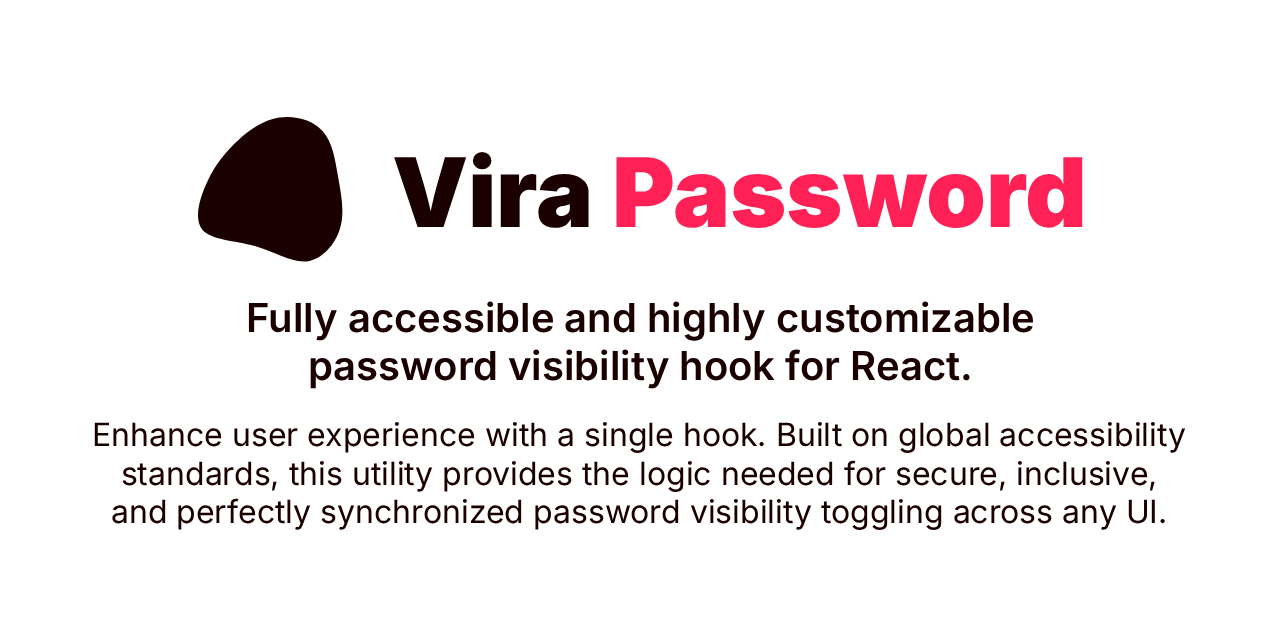
<style>
.page{position:relative;width:1280px;height:640px;background:#ffffff}
.page>*{position:absolute;margin:0}
.t1{font:96px "Inter-Black";color:#ff2056}
.t2{font:96px "Inter-Black";color:#1b0000}
.t3{font:40px "Inter-SemiBold";color:#1b0000}
.t4{font:32px "Inter-Regular";color:#1b0000}
</style>
<div class="page">
<p class="t1" style="left:394px;top:152px;width:689px;height:76px"><span class="t2">Vira </span>Password</p>
<p class="t3" style="left:248px;top:301px;width:785px;height:88px;text-align:center">Fully accessible and highly customizable password visibility hook for React.</p>
<p class="t4" style="left:94px;top:421px;width:1092px;height:109px;text-align:center">Enhance user experience with a single hook. Built on global accessibility standards, this utility provides the logic needed for secure, inclusive, and perfectly synchronized password visibility toggling across any UI.</p>
</div>
